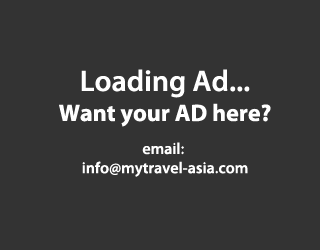
<style>
.page{position:relative;width:320px;height:250px;background:#333333}
.page>*{position:absolute;margin:0}
.t1{font:30px "MyriadPro-Semibold";color:#ffffff}
.t2{font:24px "MyriadPro-Bold";color:#ffffff}
.t3{font:16px "MyriadPro-Semibold";color:#ffffff}
</style>
<div class="page">
<p class="t1" style="left:81px;top:69px;width:169px;height:29px">Loading Ad...</p>
<p class="t2" style="left:59px;top:103px;width:212px;height:24px">Want your AD here?</p>
<p class="t3" style="left:82px;top:142px;width:166px;height:35px;text-align:center">email: <br>info@mytravel-asia.com</p>
</div>
